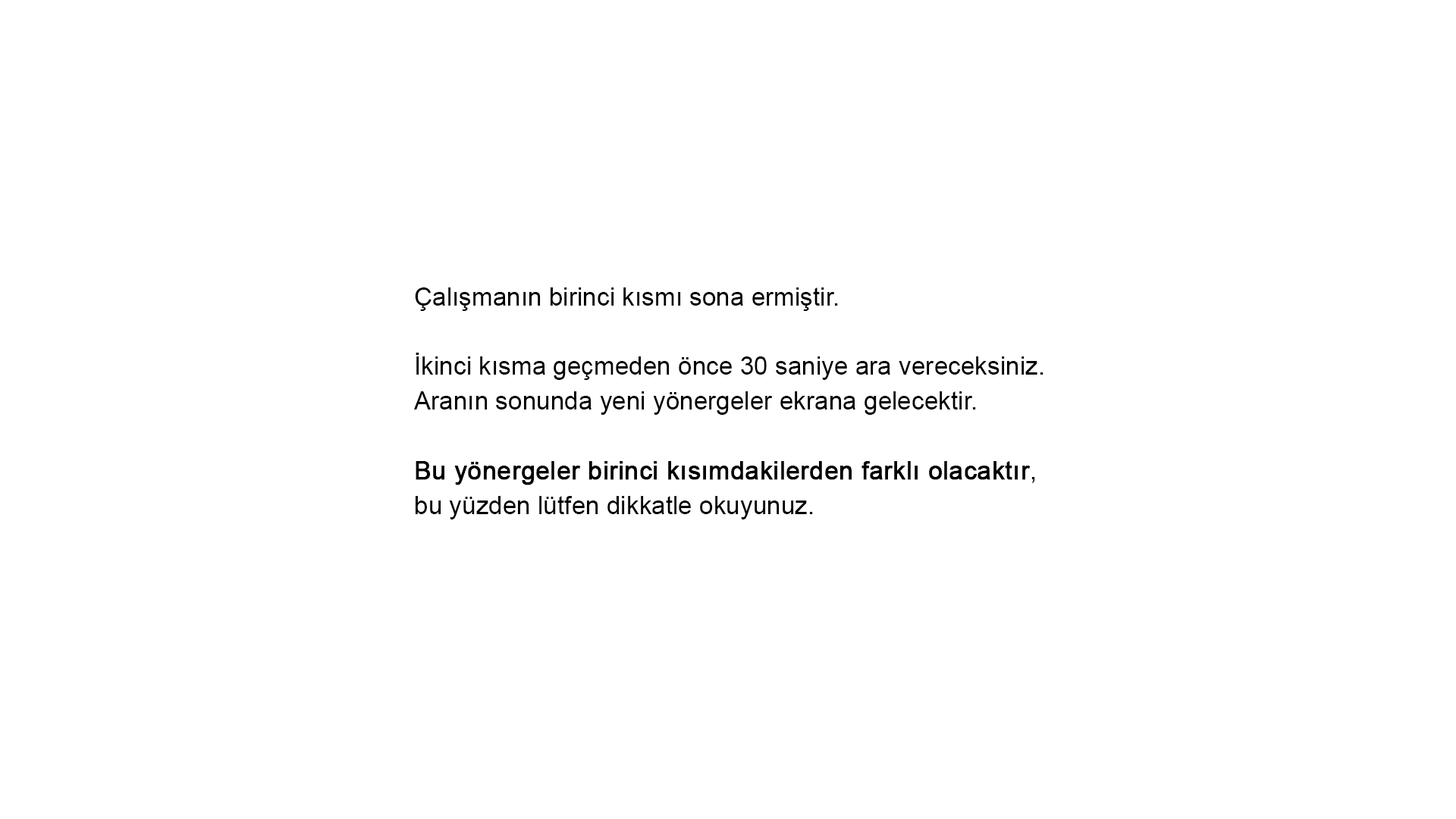
<style>
.page{position:relative;width:1456px;height:819px;background:#ffffff}
.page>*{position:absolute;margin:0}
.t1{font:25.3px/34.8px "ArialMT";color:#000000}
.t2{font:25.3px/34.8px "ArialMT";color:#000000;font-weight:bold}
</style>
<div class="page">
<p class="t1" style="left:414px;top:287px;width:629px;height:232px">Çalışmanın birinci kısmı sona ermiştir.<br><br>İkinci kısma geçmeden önce 30 saniye ara vereceksiniz.<br>Aranın sonunda yeni yönergeler ekrana gelecektir.<br><br><span class="t2">Bu yönergeler birinci kısımdakilerden farklı olacaktır</span>,<br>bu yüzden lütfen dikkatle okuyunuz.</p>
</div>
